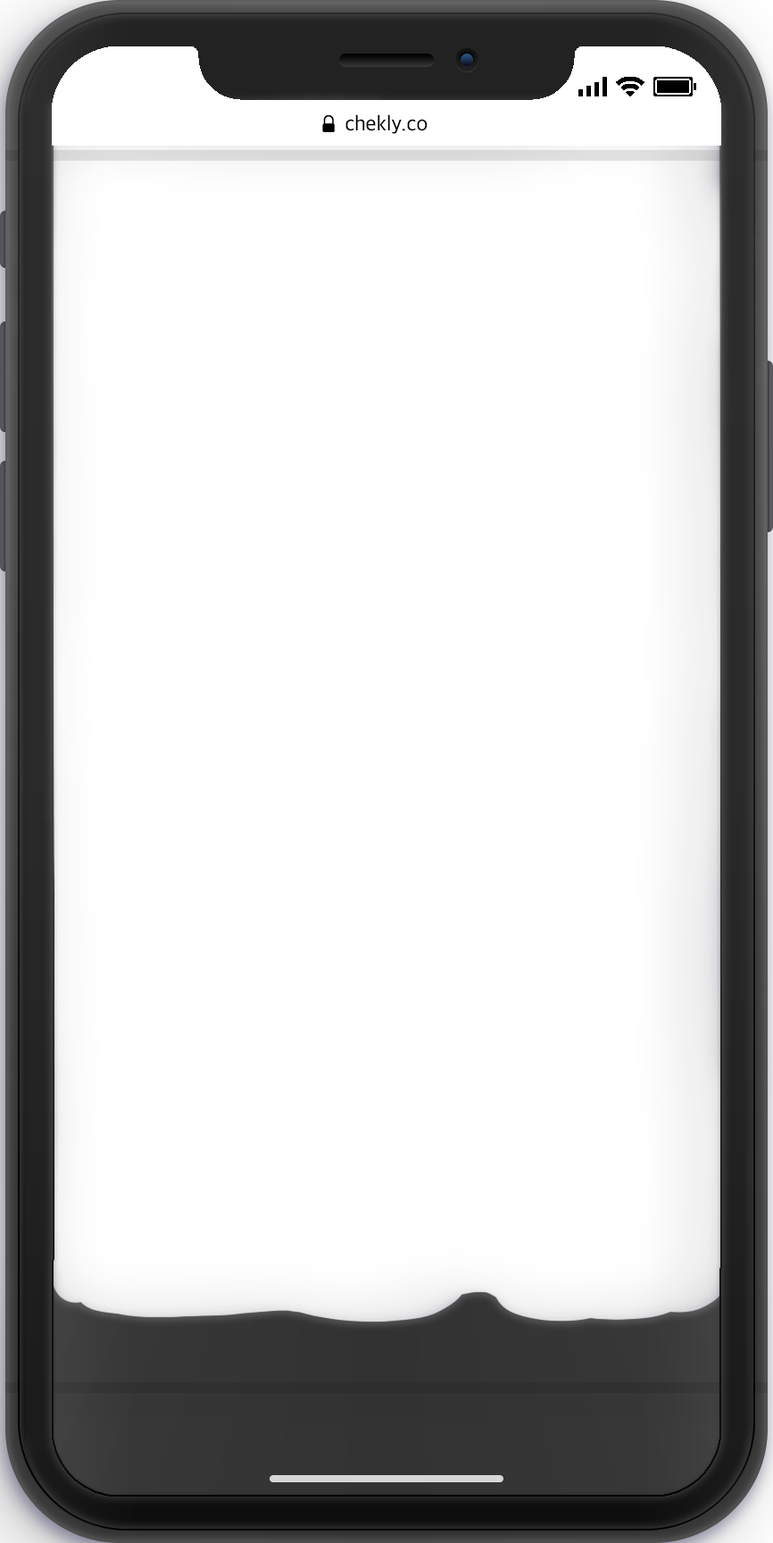
<style>
.page{position:relative;width:773px;height:1543px;background:#ffffff}
.page>*{position:absolute;margin:0}
.t1{font:21.4px "AppleSDGothicNeoM00";color:#000000}
</style>
<div class="page">
<p class="t1" style="left:345px;top:114px;width:83px;height:20px">chekly.co</p>
</div>
